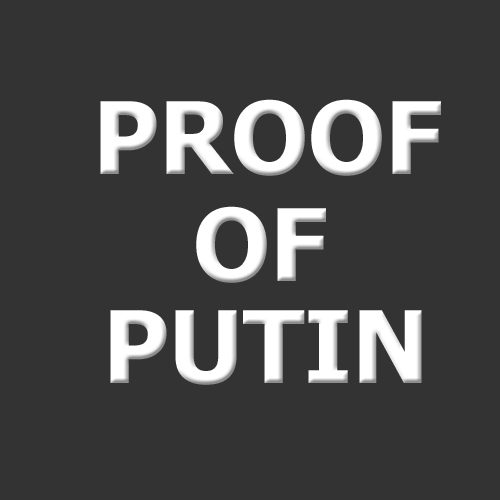
<style>
.page{position:relative;width:500px;height:500px;background:#333333}
.page>*{position:absolute;margin:0}
.t1{font:100px "Tahoma-Bold";color:#ffffff}
</style>
<div class="page">
<p class="t1" style="left:100px;top:99px;width:341px;height:77px">PROOF</p>
<p class="t1" style="left:196px;top:206px;width:130px;height:77px">OF</p>
<p class="t1" style="left:110px;top:310px;width:312px;height:75px">PUTIN</p>
</div>
